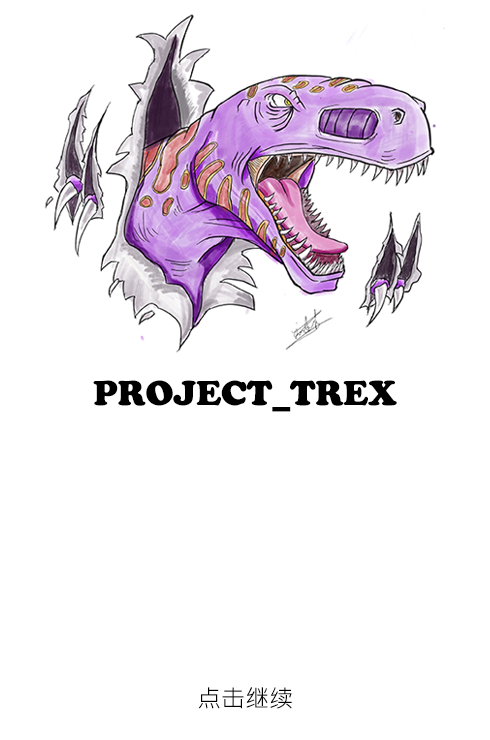
<style>
.page{position:relative;width:490px;height:740px;background:#ffffff}
.page>*{position:absolute;margin:0}
.t1{font:36px "CooperBlack";color:#000000;text-transform:uppercase}
.t2{font:24px "MicrosoftJhengHeiRegular";color:#000000;text-transform:uppercase}
</style>
<div class="page">
<p class="t1" style="left:93px;top:380px;width:304px;height:32px">PROJECT_trex</p>
<p class="t2" style="left:198px;top:687px;width:94px;height:22px">点击继续</p>
</div>
